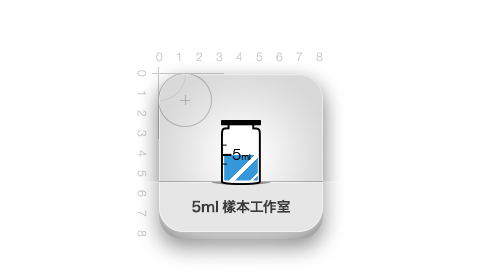
<style>
.page{position:relative;width:480px;height:278px;background:#ffffff}
.page>*{position:absolute;margin:0}
.t1{font:12px "HelveticaNeue-Light";color:#cccccc}
.t2{font:12px/30px "HelveticaNeue-Light";color:#c7c7c7}
.t3{font:14px "HiraginoSansGB-W6";color:#3a3a3a}
</style>
<div class="page">
<p class="t1" style="left:156px;top:52px;width:167px;height:10px">0    1    2    3    4    5    6    7    8</p>
<p class="t2" style="left:137px;top:70px;width:10px;height:167px">0    1    2    3    4    5    6    7    8</p>
<p class="t3" style="left:192px;top:199px;width:98px;height:15px">5ml樣本工作室</p>
</div>
